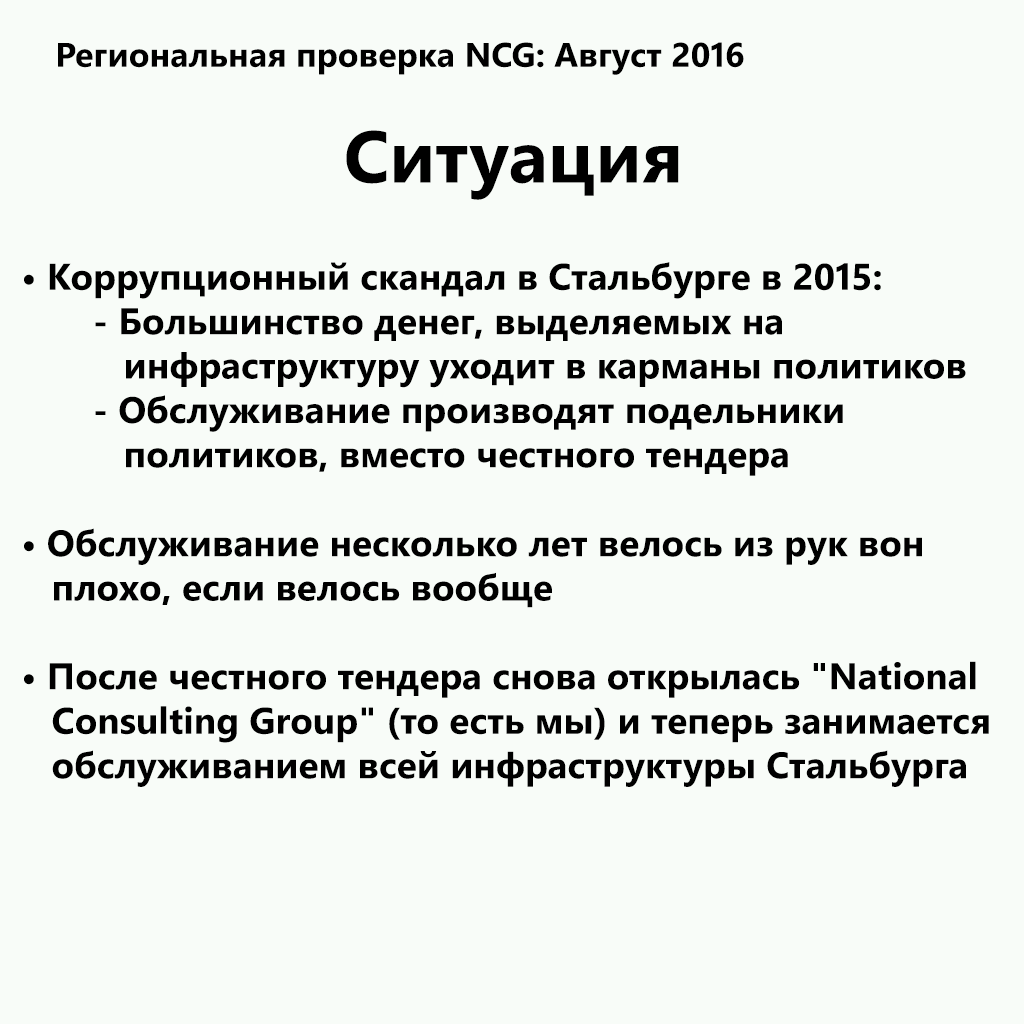
<style>
.page{position:relative;width:1024px;height:1024px;background:#f8fcf8}
.page>*{position:absolute;margin:0}
.t1{font:34px "SegoeWP-Bold";color:#000000}
.t2{font:73px "SegoeWP-Bold";color:#000000}
.t3{font:37px "SegoeWP-Bold";color:#000000}
</style>
<div class="page">
<p class="t1" style="left:58px;top:42px;width:686px;height:33px">Региональная проверка NCG: Август 2016</p>
<p class="t2" style="left:346px;top:130px;width:333px;height:70px">Ситуация</p>
<p class="t3" style="left:24px;top:262px;width:965px;height:525px">• Коррупционный скандал в Стальбурге в 2015:<br>     - Большинство денег, выделяемых на <br>     инфраструктуру уходит в карманы политиков<br>     - Обслуживание производят подельники<br>     политиков, вместо честного тендера<br><br>• Обслуживание несколько лет велось из рук вон <br>   плохо, если велось вообще<br><br>• После честного тендера снова открылась "National<br>   Consulting Group" (то есть мы) и теперь занимается<br>   обслуживанием всей инфраструктуры Стальбурга</p>
</div>
